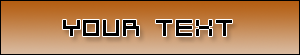
<style>
.page{position:relative;width:300px;height:55px}
.page>*{position:absolute;margin:0}
.t1{font:26px "BitDustTwo";color:#000000}
</style>
<div class="page">
<p class="t1" style="left:63px;top:20px;width:169px;height:16px">YOUR TEXT</p>
</div>
